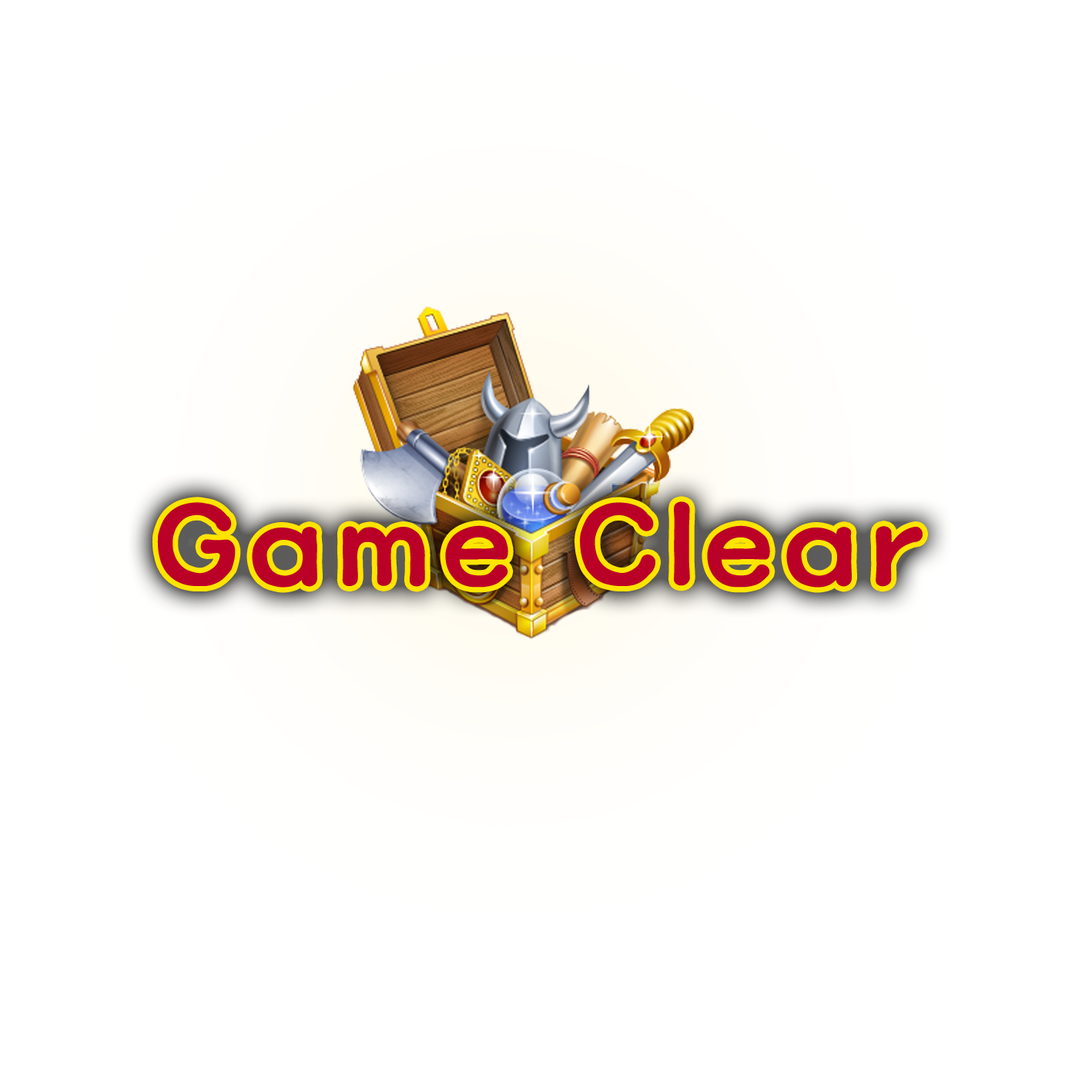
<style>
.page{position:relative;width:1092px;height:1092px;background:#ffffff}
.page>*{position:absolute;margin:0}
.t1{font:115.5px "HaanBaekjeB";letter-spacing:0.075em;color:#bb0028}
</style>
<div class="page">
<p class="t1" style="left:157px;top:501px;width:766px;height:87px">Game Clear</p>
</div>
